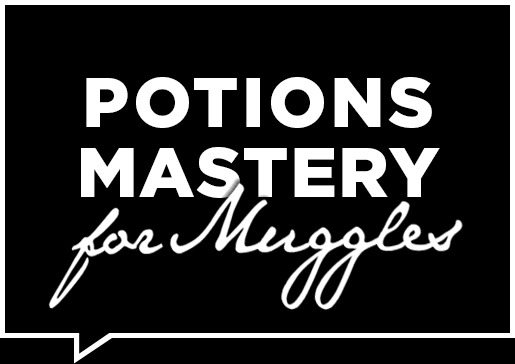
<style>
.page{position:relative;width:515px;height:364px;background:#000000}
.page>*{position:absolute;margin:0}
.t1{font:70px/85px "Gotham-Black";letter-spacing:0.05em;color:#ffffff;text-transform:uppercase}
.t2{font:70px/70px "Gotham-Black";letter-spacing:0.025em;color:#ffffff;text-transform:uppercase}
</style>
<div class="page">
<p class="t1" style="left:81px;top:77px;width:359px;height:121px;text-align:center">potions<br><span class="t2">mastery</span></p>
</div>
